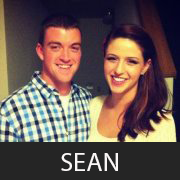
<style>
.page{position:relative;width:180px;height:180px;background:#252525}
.page>*{position:absolute;margin:0}
.t1{font:26.7px "MyriadPro-Regular";color:#faf7f7}
</style>
<div class="page">
<p class="t1" style="left:61px;top:153px;width:57px;height:18px">SEAN</p>
</div>
